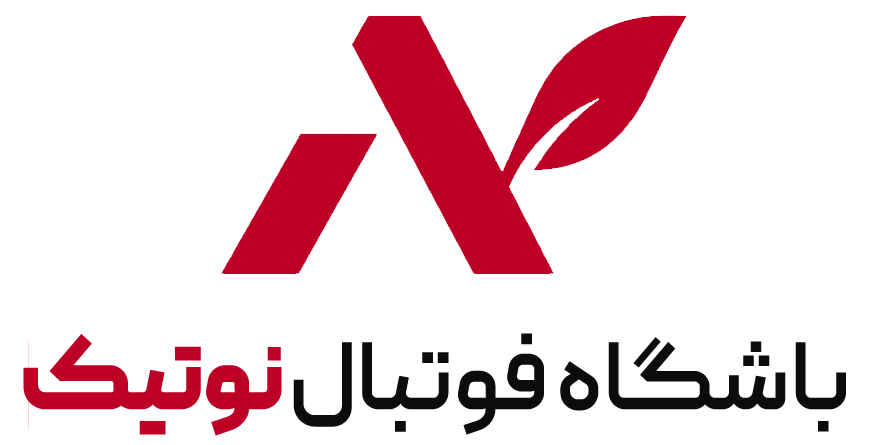
<style>
.page{position:relative;width:870px;height:445px;background:#ffffff}
.page>*{position:absolute;margin:0}
.t1{font:98.7px "Peyda-SemiBold";letter-spacing:-0.01em;color:#0c0c0c}
.t2{font:98.7px "Peyda-Black";letter-spacing:-0.01em;color:#bd0026}
</style>
<div class="page">
<p class="t1" style="left:23px;top:333px;width:823px;height:103px">باشگاه فوتبال<span class="t2"> نوتیک</span></p>
</div>
